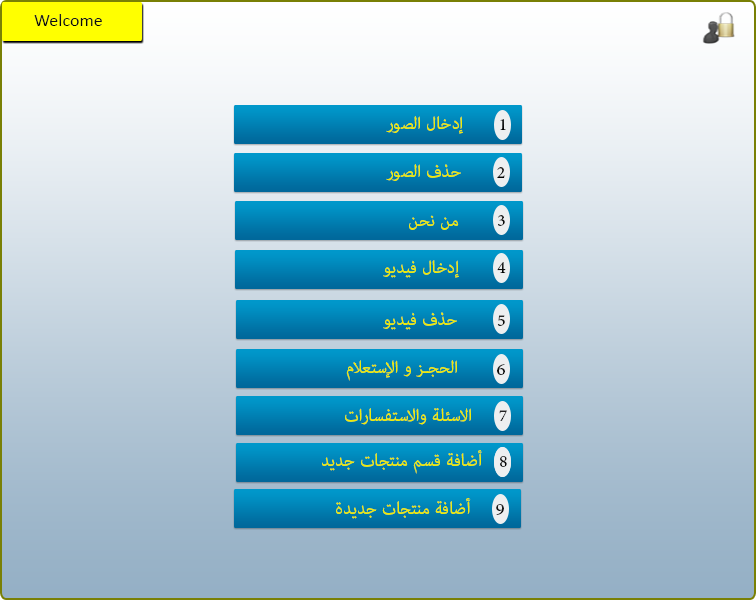
<style>
.page{position:relative;width:756px;height:600px}
.page>*{position:absolute;margin:0}
.t1{font:18px "Calibri";color:#0f0f0f}
.t2{font:24px "AdobeArabic-Regular";color:#eeeb07}
.t3{font:24px "AdobeArabic-Regular";color:#121212}
.t4{font:24px "AdobeArabic-Regular"}
.t5{font:24px "AdobeArabic-Regular";color:#151515}
.t6{font:24px "AdobeArabic-Regular";color:#0c0c0c}
.t7{font:24px "AdobeArabic-Regular";color:#1d1d1d}
.t8{font:24px "AdobeArabic-Regular";color:#0f0f0f}
.t9{font:24px "AdobeArabic-Regular";color:#232323}
.t10{font:24px "AdobeArabic-Regular";color:#181818}
</style>
<div class="page">
<p class="t1" style="left:34px;top:14px;width:68px;height:12px">Welcome</p>
<p class="t2" style="left:386px;top:116px;width:77px;height:18px">إدخال الصور</p>
<p class="t3" style="left:500px;top:119px;width:6px;height:11px">1</p>
<p class="t2" style="left:386px;top:164px;width:75px;height:17px">حذف الصور</p>
<p class="t4" style="left:497px;top:167px;width:8px;height:11px">2</p>
<p class="t2" style="left:409px;top:215px;width:50px;height:15px">من نحن</p>
<p class="t5" style="left:498px;top:215px;width:7px;height:11px">3</p>
<p class="t2" style="left:383px;top:260px;width:76px;height:18px">إدخال فيديو</p>
<p class="t6" style="left:497px;top:262px;width:9px;height:11px">4</p>
<p class="t2" style="left:383px;top:312px;width:74px;height:18px">حذف فيديو</p>
<p class="t7" style="left:497px;top:315px;width:8px;height:11px">5</p>
<p class="t2" style="left:346px;top:360px;width:111px;height:21px">الحجـز و الإستعلام</p>
<p class="t8" style="left:497px;top:364px;width:8px;height:11px">6</p>
<p class="t2" style="left:345px;top:408px;width:126px;height:17px">الاسئلة والاستفسارات</p>
<p class="t9" style="left:499px;top:410px;width:8px;height:11px">7</p>
<p class="t2" style="left:322px;top:450px;width:160px;height:24px">أضافة قسم منتجات جديد</p>
<p class="t5" style="left:500px;top:456px;width:7px;height:11px">8</p>
<p class="t2" style="left:336px;top:498px;width:135px;height:21px">أضافة منتجات جديدة</p>
<p class="t10" style="left:496px;top:504px;width:8px;height:11px">9</p>
</div>
